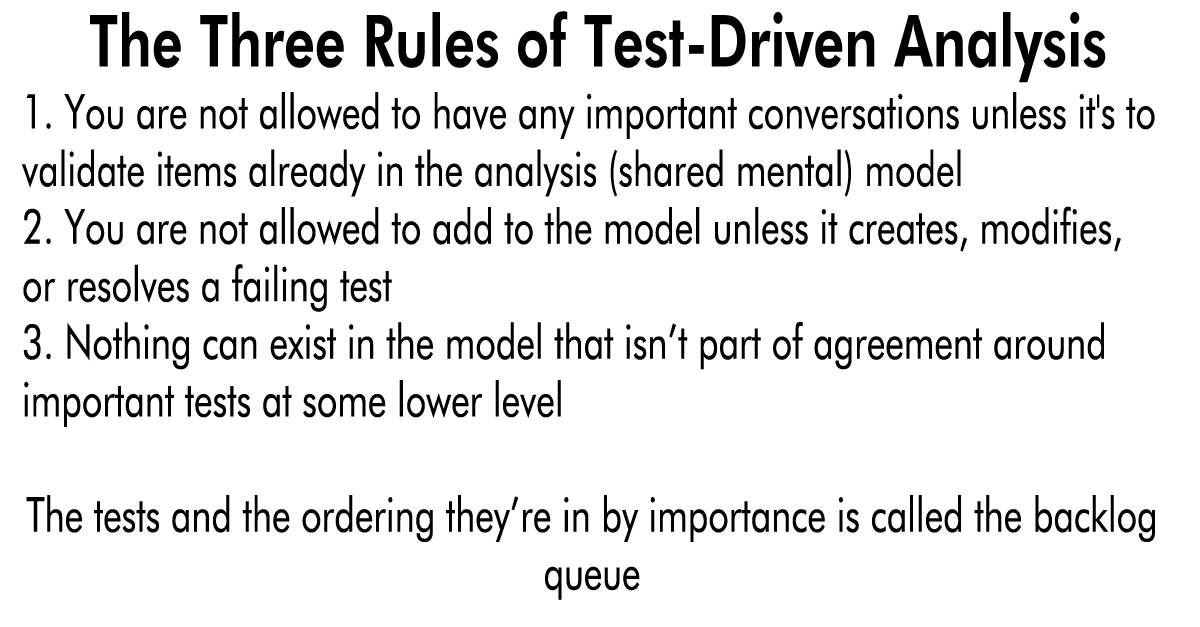
<style>
.page{position:relative;width:1200px;height:627px;background:#ffffff}
.page>*{position:absolute;margin:0}
.t1{font:72px "FuturaBT-Heavy";color:#000000;scale:0.75 1}
.t2{font:48px "FuturaBT-Book";color:#000000;scale:0.75 1}
</style>
<div class="page">
<p class="t1" style="left:90px;top:11px;width:1016px;height:72px">The Three Rules of Test-Driven Analysis</p>
<p class="t2" style="left:22px;top:92px;width:1133px;height:508px">1. You are not allowed to have any important conversations unless it's to validate items already in the analysis (shared mental) model<br>2. You are not allowed to add to the model unless it creates, modifies, or resolves a failing test<br>3. Nothing can exist in the model that isn’t part of agreement around important tests at some lower level<br><br>The tests and the ordering they’re in by importance is called the backlog queue</p>
</div>
